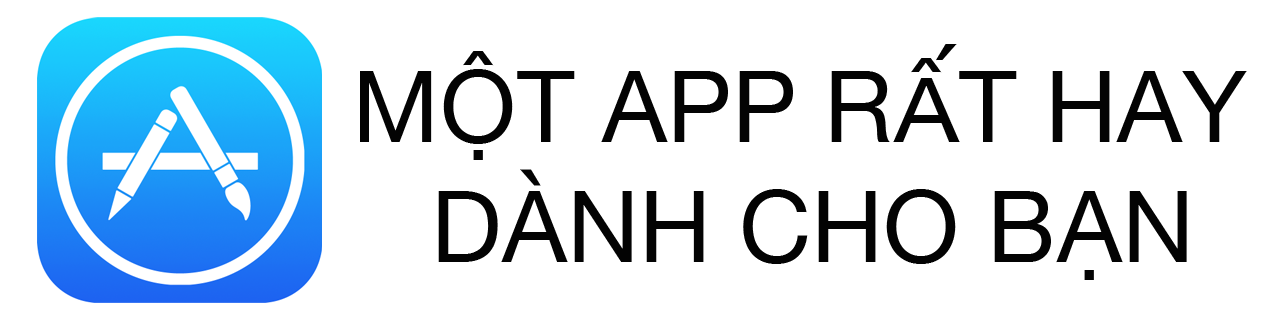
<style>
.page{position:relative;width:1280px;height:320px;background:#ffffff}
.page>*{position:absolute;margin:0}
.t1{font:100px "HelveticaNeue";color:#030303}
</style>
<div class="page">
<p class="t1" style="left:360px;top:44px;width:887px;height:236px;text-align:center">MỘT APP RẤT HAY <br>DÀNH CHO BẠN</p>
</div>
